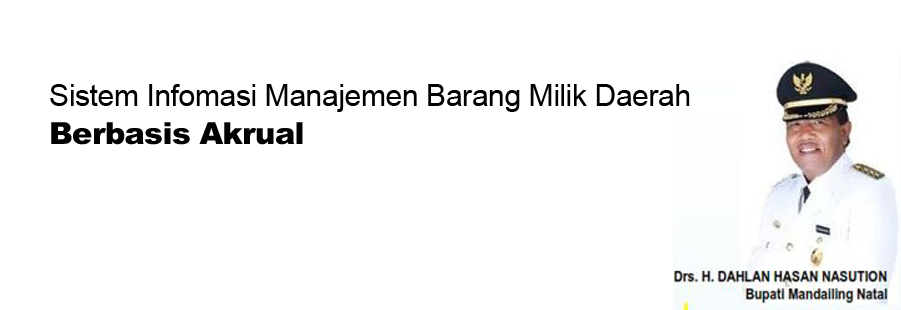
<style>
.page{position:relative;width:901px;height:310px;background:#ffffff}
.page>*{position:absolute;margin:0}
.t1{font:30.2px/37.7px "ArialMT";letter-spacing:-0.02em;color:#010101}
.t2{font:30.2px/37.7px "Arial-Black";letter-spacing:-0.02em;color:#010101}
</style>
<div class="page">
<p class="t1" style="left:50px;top:84px;width:640px;height:61px">Sistem Infomasi Manajemen Barang Milik Daerah<br><span class="t2">Berbasis Akrual</span></p>
</div>
